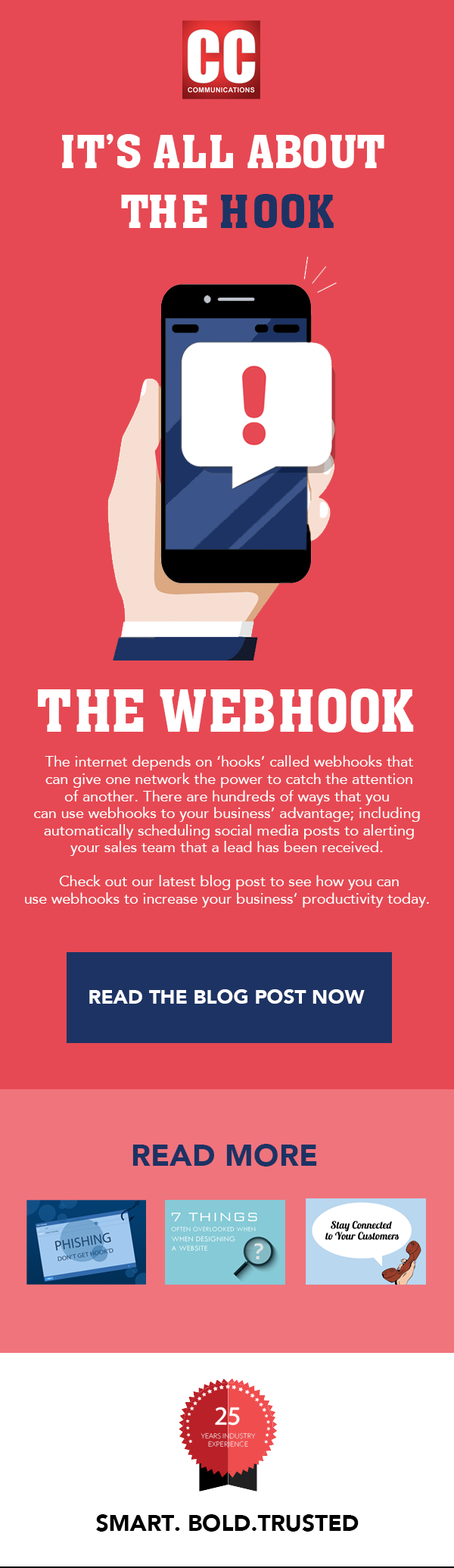
<style>
.page{position:relative;width:454px;height:1568px;background:#e64953}
.page>*{position:absolute;margin:0}
.t1{font:45.2px/59.9px "AachenBT-Roman";color:#ffffff}
.t2{font:45.2px/59.9px "AachenBT-Roman";color:#1c3364}
.t3{font:56.8px "AachenBT-Roman";color:#ffffff}
.t4{font:15.5px/17.1px "Avenir-Roman";color:#ffffff}
.t5{font:19.8px "Avenir-Black";color:#ffffff}
.t6{font:30.6px "Avenir-Black";color:#1c3364}
.t7{font:22.6px "Avenir-Black";color:#000000}
</style>
<div class="page">
<p class="t1" style="left:62px;top:134px;width:323px;height:94px;text-align:center">IT’S ALL ABOUT <br>THE <span class="t2">HOOK</span></p>
<p class="t3" style="left:38px;top:689px;width:376px;height:43px">THE WEBHOOK</p>
<p class="t4" style="left:25px;top:755px;width:404px;height:152px;text-align:center">The internet depends on ‘hooks’ called webhooks that<br>can give one network the power to catch the attention<br>of another. There are hundreds of ways that you <br>can use webhooks to your business’ advantage; including <br>automatically scheduling social media posts to alerting<br>your sales team that a lead has been received. <br><br>Check out our latest blog post to see how you can<br>use webhooks to increase your business’ productivity today.</p>
<p class="t5" style="left:89px;top:989px;width:276px;height:15px">READ THE BLOG POST NOW</p>
<p class="t6" style="left:133px;top:1144px;width:184px;height:23px">READ MORE</p>
<p class="t7" style="left:96px;top:1514px;width:263px;height:18px">SMART. BOLD.TRUSTED</p>
</div>
